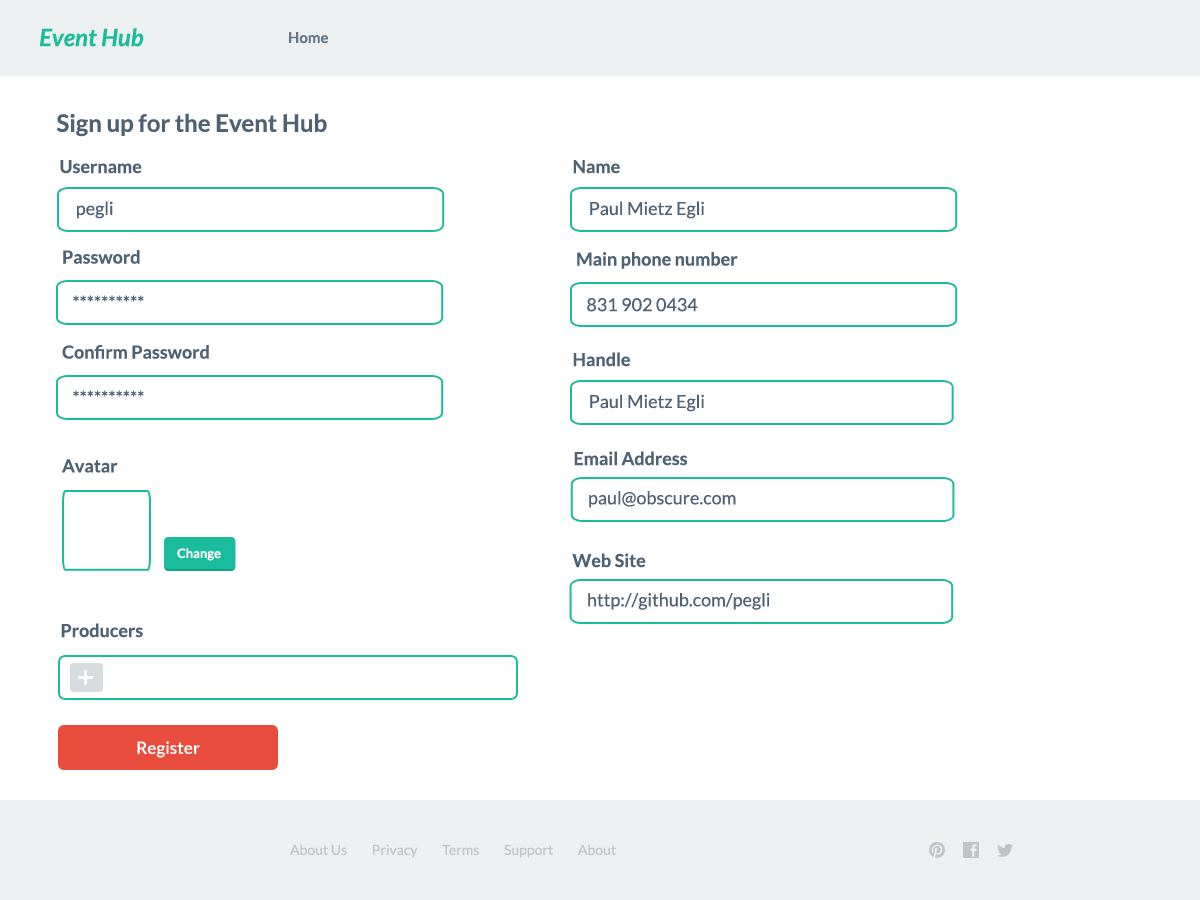
<style>
.page{position:relative;width:1200px;height:900px;background:#ffffff}
.page>*{position:absolute;margin:0}
.t1{font:24px "Lato-BoldItalic";color:#1abc9c}
.t2{font:15px "Lato-Bold";color:#4f6274}
.t3{font:24px "Lato-Bold";color:#4f6274}
.t4{font:18px "Lato-Bold";color:#4f6274}
.t5{font:18px "Lato-Regular";color:#4f6274}
.t6{font:13px "Lato-Bold";color:#ffffff}
.t7{font:17px "Lato-Bold";color:#ffffff}
.t8{font:14px "Lato-Regular";color:#c0c5ca}
</style>
<div class="page">
<p class="t1" style="left:40px;top:28px;width:104px;height:19px">Event Hub</p>
<p class="t2" style="left:289px;top:32px;width:39px;height:12px;opacity:0.85">Home</p>
<p class="t3" style="left:56px;top:113px;width:271px;height:24px">Sign up for the Event Hub</p>
<p class="t4" style="left:60px;top:160px;width:82px;height:14px">Username</p>
<p class="t4" style="left:573px;top:160px;width:47px;height:14px">Name</p>
<p class="t5" style="left:77px;top:201px;width:36px;height:18px">pegli</p>
<p class="t5" style="left:590px;top:201px;width:114px;height:18px">Paul Mietz Egli</p>
<p class="t4" style="left:63px;top:250px;width:77px;height:14px">Password</p>
<p class="t4" style="left:577px;top:252px;width:161px;height:17px">Main phone number</p>
<p class="t5" style="left:73px;top:295px;width:71px;height:7px">**********</p>
<p class="t5" style="left:587px;top:298px;width:111px;height:14px">831 902 0434</p>
<p class="t4" style="left:62px;top:345px;width:147px;height:14px">Confirm Password</p>
<p class="t4" style="left:573px;top:352px;width:57px;height:15px">Handle</p>
<p class="t5" style="left:73px;top:390px;width:71px;height:7px">**********</p>
<p class="t5" style="left:590px;top:394px;width:114px;height:18px">Paul Mietz Egli</p>
<p class="t4" style="left:62px;top:459px;width:56px;height:14px">Avatar</p>
<p class="t4" style="left:574px;top:451px;width:113px;height:15px">Email Address</p>
<p class="t5" style="left:589px;top:491px;width:147px;height:17px">paul@obscure.com</p>
<p class="t6" style="left:177px;top:548px;width:44px;height:13px">Change</p>
<p class="t4" style="left:572px;top:553px;width:74px;height:15px">Web Site</p>
<p class="t5" style="left:588px;top:593px;width:182px;height:17px">http://github.com/pegli</p>
<p class="t4" style="left:61px;top:623px;width:82px;height:15px">Producers</p>
<p class="t7" style="left:137px;top:741px;width:63px;height:17px">Register</p>
<p class="t8" style="left:290px;top:844px;width:326px;height:14px">About Us         Privacy         Terms         Support         About</p>
</div>
